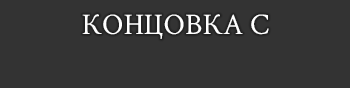
<style>
.page{position:relative;width:350px;height:88px;background:#333333}
.page>*{position:absolute;margin:0}
.t1{font:30px "CrimsonText-Regular";color:#ffffff}
</style>
<div class="page">
<p class="t1" style="left:82px;top:14px;width:187px;height:25px">КОНЦОВКА C</p>
</div>
